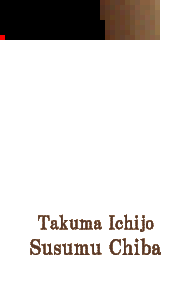
<style>
.page{position:relative;width:192px;height:296px;background:#ffffff}
.page>*{position:absolute;margin:0}
.t1{font:18.7px "HGPMinchoB";color:#583828}
.t2{font:21.3px "HGPMinchoB";color:#583828}
</style>
<div class="page">
<p class="t1" style="left:30px;top:214px;width:131px;height:41px;text-align:center">Takuma Ichijo<br><span class="t2">Susumu Chiba</span></p>
</div>
